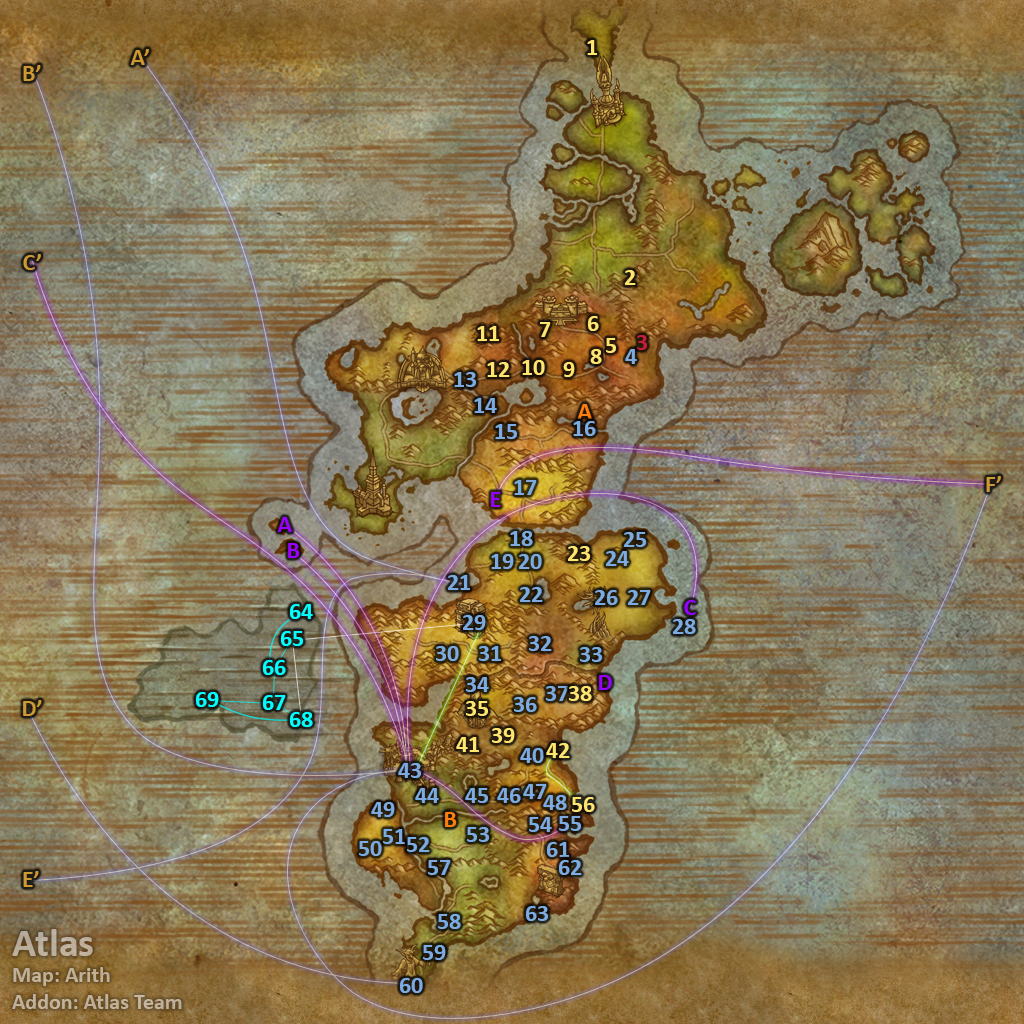
<style>
.page{position:relative;width:1024px;height:1024px}
.page>*{position:absolute;margin:0}
.t1{font:24px "Calibri-Bold";color:#fee570}
.t2{font:24px "Calibri-Bold";color:#cc9933}
.t3{font:24px "Calibri-Bold";color:#c41f3b}
.t4{font:24px "Calibri-Bold";color:#7babe0}
.t5{font:24px "Calibri-Bold";color:#ff7d0a}
.t6{font:24px "Calibri-Bold";color:#9900ff}
.t7{font:24px "Calibri-Bold";color:#00ffff}
.t8{font:22px "Calibri-Bold";color:#bfaf9b}
.t9{font:40px "Calibri-Bold";color:#bfaf9b}
</style>
<div class="page">
<p class="t1" style="left:587px;top:40px;width:10px;height:15px">1</p>
<p class="t2" style="left:130px;top:49px;width:19px;height:16px">A’</p>
<p class="t2" style="left:23px;top:65px;width:18px;height:16px">B’</p>
<p class="t2" style="left:23px;top:254px;width:18px;height:16px">C’</p>
<p class="t1" style="left:625px;top:270px;width:11px;height:15px">2</p>
<p class="t1" style="left:588px;top:316px;width:11px;height:15px">6</p>
<p class="t1" style="left:477px;top:326px;width:22px;height:15px">11</p>
<p class="t1" style="left:540px;top:322px;width:11px;height:15px">7</p>
<p class="t1" style="left:606px;top:338px;width:10px;height:15px">5</p>
<p class="t3" style="left:637px;top:335px;width:10px;height:15px">3</p>
<p class="t1" style="left:590px;top:349px;width:12px;height:15px">8</p>
<p class="t4" style="left:625px;top:349px;width:12px;height:15px">4</p>
<p class="t1" style="left:487px;top:362px;width:23px;height:15px">12</p>
<p class="t1" style="left:522px;top:360px;width:23px;height:15px">10</p>
<p class="t1" style="left:563px;top:362px;width:12px;height:15px">9</p>
<p class="t4" style="left:454px;top:372px;width:22px;height:15px">13</p>
<p class="t4" style="left:474px;top:398px;width:23px;height:15px">14</p>
<p class="t5" style="left:577px;top:404px;width:15px;height:15px">A</p>
<p class="t4" style="left:495px;top:424px;width:22px;height:15px">15</p>
<p class="t4" style="left:573px;top:421px;width:23px;height:15px">16</p>
<p class="t4" style="left:514px;top:480px;width:23px;height:15px">17</p>
<p class="t2" style="left:986px;top:476px;width:15px;height:16px">F’</p>
<p class="t6" style="left:491px;top:492px;width:10px;height:15px">E</p>
<p class="t6" style="left:277px;top:517px;width:15px;height:15px">A</p>
<p class="t4" style="left:510px;top:531px;width:23px;height:15px">18</p>
<p class="t4" style="left:624px;top:532px;width:22px;height:15px">25</p>
<p class="t6" style="left:288px;top:543px;width:12px;height:15px">B</p>
<p class="t4" style="left:491px;top:554px;width:23px;height:15px">19</p>
<p class="t4" style="left:519px;top:554px;width:23px;height:15px">20</p>
<p class="t1" style="left:568px;top:546px;width:22px;height:15px">23</p>
<p class="t4" style="left:606px;top:551px;width:23px;height:15px">24</p>
<p class="t4" style="left:448px;top:575px;width:22px;height:15px">21</p>
<p class="t4" style="left:520px;top:587px;width:23px;height:15px">22</p>
<p class="t4" style="left:595px;top:590px;width:23px;height:15px">26</p>
<p class="t4" style="left:628px;top:590px;width:23px;height:15px">27</p>
<p class="t7" style="left:290px;top:604px;width:23px;height:15px">64</p>
<p class="t6" style="left:684px;top:600px;width:12px;height:15px">C</p>
<p class="t4" style="left:463px;top:615px;width:23px;height:15px">29</p>
<p class="t4" style="left:673px;top:619px;width:23px;height:15px">28</p>
<p class="t7" style="left:281px;top:631px;width:22px;height:15px">65</p>
<p class="t4" style="left:529px;top:636px;width:23px;height:15px">32</p>
<p class="t4" style="left:436px;top:646px;width:23px;height:15px">30</p>
<p class="t4" style="left:479px;top:646px;width:22px;height:15px">31</p>
<p class="t4" style="left:580px;top:647px;width:22px;height:15px">33</p>
<p class="t7" style="left:263px;top:660px;width:23px;height:15px">66</p>
<p class="t4" style="left:466px;top:677px;width:23px;height:15px">34</p>
<p class="t6" style="left:599px;top:675px;width:13px;height:15px">D</p>
<p class="t4" style="left:546px;top:686px;width:23px;height:15px">37</p>
<p class="t1" style="left:569px;top:686px;width:23px;height:15px">38</p>
<p class="t2" style="left:23px;top:700px;width:19px;height:16px">D’</p>
<p class="t7" style="left:196px;top:692px;width:23px;height:15px">69</p>
<p class="t7" style="left:263px;top:695px;width:23px;height:15px">67</p>
<p class="t1" style="left:466px;top:701px;width:22px;height:15px">35</p>
<p class="t4" style="left:514px;top:697px;width:23px;height:15px">36</p>
<p class="t7" style="left:290px;top:712px;width:23px;height:15px">68</p>
<p class="t1" style="left:456px;top:737px;width:23px;height:15px">41</p>
<p class="t1" style="left:492px;top:728px;width:23px;height:15px">39</p>
<p class="t4" style="left:520px;top:748px;width:24px;height:15px">40</p>
<p class="t1" style="left:546px;top:743px;width:24px;height:15px">42</p>
<p class="t4" style="left:398px;top:763px;width:23px;height:15px">43</p>
<p class="t4" style="left:523px;top:784px;width:24px;height:15px">47</p>
<p class="t4" style="left:415px;top:788px;width:24px;height:15px">44</p>
<p class="t4" style="left:465px;top:788px;width:23px;height:15px">45</p>
<p class="t4" style="left:497px;top:788px;width:24px;height:15px">46</p>
<p class="t4" style="left:543px;top:795px;width:24px;height:15px">48</p>
<p class="t1" style="left:572px;top:797px;width:23px;height:15px">56</p>
<p class="t4" style="left:371px;top:802px;width:24px;height:15px">49</p>
<p class="t5" style="left:445px;top:812px;width:12px;height:15px">B</p>
<p class="t4" style="left:529px;top:817px;width:23px;height:15px">54</p>
<p class="t4" style="left:559px;top:816px;width:22px;height:15px">55</p>
<p class="t4" style="left:383px;top:829px;width:22px;height:15px">51</p>
<p class="t4" style="left:467px;top:827px;width:22px;height:15px">53</p>
<p class="t4" style="left:359px;top:841px;width:23px;height:15px">50</p>
<p class="t4" style="left:407px;top:837px;width:23px;height:15px">52</p>
<p class="t4" style="left:547px;top:842px;width:22px;height:15px">61</p>
<p class="t4" style="left:428px;top:860px;width:23px;height:15px">57</p>
<p class="t4" style="left:559px;top:860px;width:23px;height:15px">62</p>
<p class="t2" style="left:23px;top:871px;width:16px;height:16px">E’</p>
<p class="t4" style="left:438px;top:914px;width:23px;height:15px">58</p>
<p class="t4" style="left:526px;top:906px;width:22px;height:15px">63</p>
<p class="t8" style="left:12px;top:929px;width:170px;height:80px"><span class="t9">Atlas<br></span>Map: Arith<br>Addon: Atlas Team</p>
<p class="t4" style="left:423px;top:945px;width:23px;height:15px">59</p>
<p class="t4" style="left:400px;top:978px;width:23px;height:15px">60</p>
</div>
